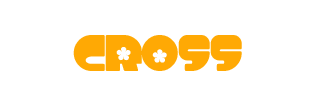
<style>
.page{position:relative;width:320px;height:100px;background:#ffffff}
.page>*{position:absolute;margin:0}
.t1{font:72px "Chick";color:#ffa904}
</style>
<div class="page">
<p class="t1" style="left:73px;top:35px;width:169px;height:36px">CROSS</p>
</div>
